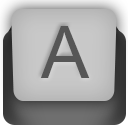
<style>
.page{position:relative;width:128px;height:128px}
.page>*{position:absolute;margin:0}
.t1{font:72px "ArialMT";letter-spacing:0.054em;color:#565656}
</style>
<div class="page">
<p class="t1" style="left:40px;top:26px;width:50px;height:52px">A</p>
</div>
